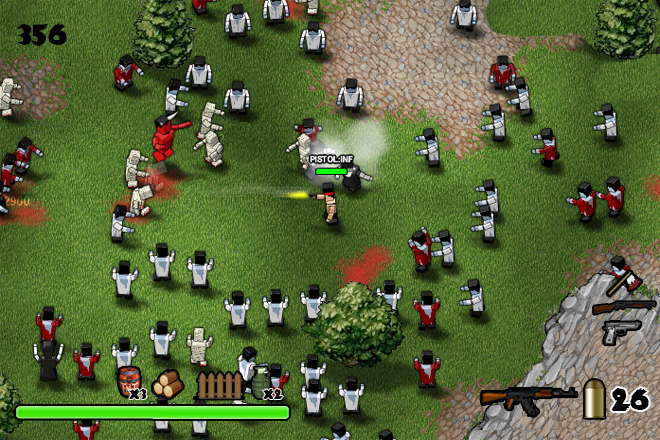
<style>
.page{position:relative;width:660px;height:440px}
.page>*{position:absolute;margin:0}
.t1{font:36px "ZombieA";color:#000000}
.t2{font:16.6px "ZombieA";color:#000000}
</style>
<div class="page">
<p class="t1" style="left:17px;top:23px;width:50px;height:23px">356</p>
<p class="t2" style="left:128px;top:389px;width:19px;height:10px">x3</p>
<p class="t2" style="left:262px;top:389px;width:21px;height:10px">x2</p>
<p class="t1" style="left:611px;top:388px;width:38px;height:23px">26</p>
</div>
